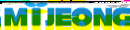
<style>
.page{position:relative;width:130px;height:30px}
.page>*{position:absolute;margin:0}
.t1{font:21.1px "Partial-Sans-KR"}
</style>
<div class="page">
<p class="t1" style="left:43px;top:7px;width:86px;height:19px">JEONG</p>
</div>
